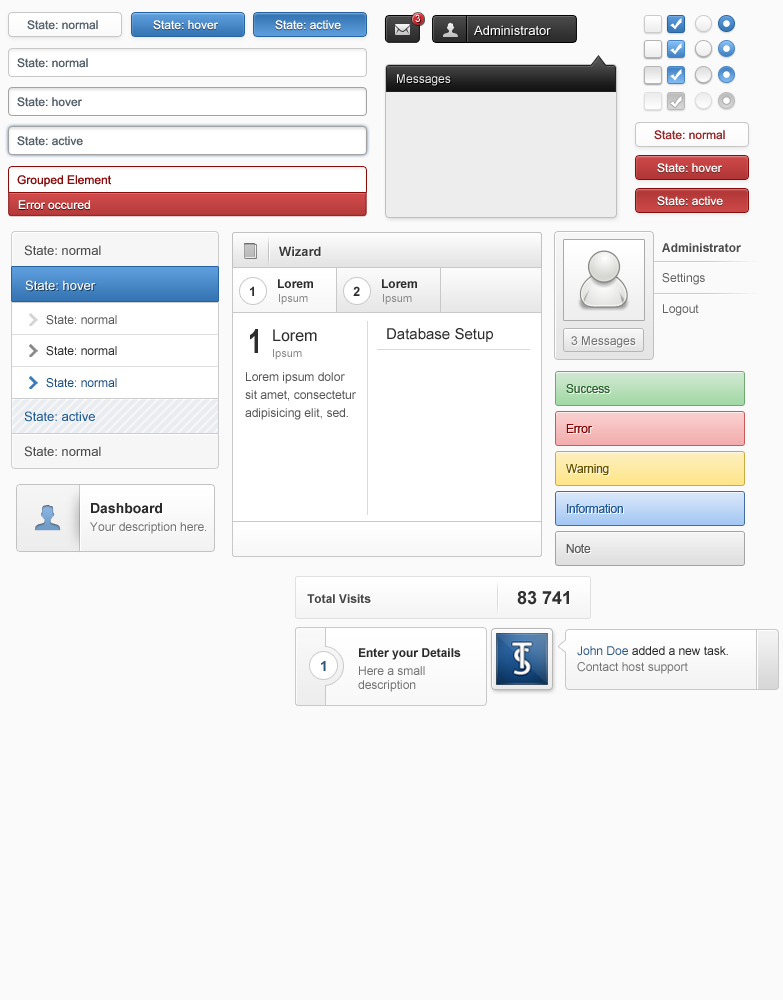
<style>
.page{position:relative;width:783px;height:1000px;background:#fafafa}
.page>*{position:absolute;margin:0}
.t1{font:10px "ArialMT";color:#ffffff}
.t2{font:12px "ArialMT";color:#58646d}
.t3{font:12px "ArialMT";color:#fafafa}
.t4{font:13px "ArialMT";color:#ffffff}
.t5{font:12px "ArialMT";color:#54616a}
.t6{font:12px "ArialMT";color:#efefef}
.t7{font:12px "ArialMT";color:#952a2a}
.t8{font:12px "ArialMT";color:#870d0d}
.t9{font:12px "ArialMT";color:#ffffff}
.t10{font:13px "ArialMT";color:#4b4b4b}
.t11{font:13px "Arial-BoldMT";color:#383838}
.t12{font:12px "Arial-BoldMT";color:#4d4d4d}
.t13{font:12px "Arial-BoldMT";color:#2d2d2d}
.t14{font:12px "ArialMT";color:#626262}
.t15{font:13px "Arial-BoldMT";color:#2d2d2d}
.t16{font:11px "ArialMT";color:#8b8b8b}
.t17{font:12px "ArialMT";color:#575757}
.t18{font:33px "Arial-BoldMT";color:#2d2d2d;scale:0.76 1}
.t19{font:16px "ArialMT";color:#2d2d2d}
.t20{font:15px "ArialMT";color:#2d2d2d}
.t21{font:12px "ArialMT";color:#6f6f6f}
.t22{font:12px "ArialMT";color:#292929}
.t23{font:12px/18px "ArialMT";color:#545454}
.t24{font:12px "ArialMT";color:#164a7e}
.t25{font:12px "ArialMT";letter-spacing:-0.02em;color:#2a632e}
.t26{font:13px "ArialMT";color:#205a94}
.t27{font:12px "ArialMT";letter-spacing:-0.02em;color:#820101}
.t28{font:12px "ArialMT";letter-spacing:-0.02em;color:#675100}
.t29{font:14px "Arial-BoldMT";color:#2a2a2a}
.t30{font:12px "ArialMT";letter-spacing:-0.02em;color:#205a94}
.t31{font:12px "ArialMT";color:#717171}
.t32{font:12px "ArialMT";letter-spacing:-0.02em;color:#5b5b5b}
.t33{font:18px "Arial-BoldMT";color:#313131}
.t34{font:12px "Arial-BoldMT";color:#464646}
.t35{font:12px "Arial-BoldMT";color:#2a2a2a}
.t36{font:12px "ArialMT";color:#262626}
.t37{font:12px "ArialMT";color:#305883}
.t38{font:14px "Arial-BoldMT";color:#2e5681}
.t39{font:12px "ArialMT";color:#747474}
</style>
<div class="page">
<p class="t1" style="left:415px;top:14px;width:5px;height:8px">3</p>
<p class="t2" style="left:27px;top:20px;width:71px;height:10px">State: normal</p>
<p class="t3" style="left:153px;top:20px;width:65px;height:10px">State: hover</p>
<p class="t3" style="left:275px;top:20px;width:66px;height:10px">State: active</p>
<p class="t4" style="left:474px;top:25px;width:77px;height:10px">Administrator</p>
<p class="t5" style="left:17px;top:58px;width:71px;height:10px">State: normal</p>
<p class="t6" style="left:397px;top:74px;width:54px;height:12px">Messages</p>
<p class="t5" style="left:17px;top:97px;width:65px;height:10px">State: hover</p>
<p class="t5" style="left:17px;top:136px;width:66px;height:10px">State: active</p>
<p class="t7" style="left:654px;top:130px;width:71px;height:10px">State: normal</p>
<p class="t3" style="left:657px;top:163px;width:65px;height:10px">State: hover</p>
<p class="t8" style="left:17px;top:175px;width:94px;height:12px">Grouped Element</p>
<p class="t3" style="left:657px;top:196px;width:66px;height:10px">State: active</p>
<p class="t9" style="left:18px;top:200px;width:72px;height:10px">Error occured</p>
<p class="t10" style="left:24px;top:245px;width:77px;height:11px">State: normal</p>
<p class="t11" style="left:279px;top:246px;width:42px;height:10px">Wizard</p>
<p class="t12" style="left:662px;top:243px;width:79px;height:9px">Administrator</p>
<p class="t4" style="left:25px;top:280px;width:71px;height:11px">State: hover</p>
<p class="t13" style="left:278px;top:279px;width:35px;height:9px">Lorem</p>
<p class="t13" style="left:382px;top:279px;width:35px;height:9px">Lorem</p>
<p class="t14" style="left:662px;top:273px;width:43px;height:12px">Settings</p>
<p class="t15" style="left:250px;top:286px;width:4px;height:10px">1</p>
<p class="t16" style="left:279px;top:294px;width:29px;height:11px">Ipsum</p>
<p class="t15" style="left:353px;top:286px;width:7px;height:10px">2</p>
<p class="t16" style="left:383px;top:294px;width:29px;height:11px">Ipsum</p>
<p class="t14" style="left:663px;top:304px;width:36px;height:12px">Logout</p>
<p class="t17" style="left:46px;top:315px;width:71px;height:10px">State: normal</p>
<p class="t18" style="left:250px;top:329px;width:8px;height:24px">1</p>
<p class="t19" style="left:273px;top:329px;width:44px;height:13px">Lorem</p>
<p class="t20" style="left:387px;top:328px;width:106px;height:14px">Database Setup</p>
<p class="t21" style="left:571px;top:336px;width:65px;height:12px">3 Messages</p>
<p class="t22" style="left:46px;top:346px;width:71px;height:10px">State: normal</p>
<p class="t16" style="left:273px;top:349px;width:29px;height:11px">Ipsum</p>
<p class="t23" style="left:245px;top:372px;width:111px;height:48px">Lorem ipsum dolor<br>sit amet, consectetur<br>adipisicing elit, sed.</p>
<p class="t24" style="left:46px;top:378px;width:71px;height:10px">State: normal</p>
<p class="t25" style="left:566px;top:384px;width:44px;height:9px">Success</p>
<p class="t26" style="left:24px;top:411px;width:71px;height:11px">State: active</p>
<p class="t27" style="left:566px;top:424px;width:26px;height:9px">Error</p>
<p class="t10" style="left:24px;top:446px;width:77px;height:11px">State: normal</p>
<p class="t28" style="left:566px;top:464px;width:43px;height:11px">Warning</p>
<p class="t29" style="left:91px;top:503px;width:71px;height:11px">Dashboard</p>
<p class="t30" style="left:567px;top:504px;width:56px;height:9px">Information</p>
<p class="t31" style="left:90px;top:522px;width:116px;height:12px">Your description here.</p>
<p class="t32" style="left:566px;top:544px;width:25px;height:9px">Note</p>
<p class="t33" style="left:517px;top:591px;width:52px;height:14px">83 741</p>
<p class="t34" style="left:307px;top:594px;width:64px;height:9px">Total Visits</p>
<p class="t35" style="left:359px;top:648px;width:102px;height:12px">Enter your Details</p>
<p class="t36" style="left:577px;top:646px;width:151px;height:10px"><span class="t37">John Doe</span> added a new task.</p>
<p class="t38" style="left:321px;top:661px;width:5px;height:10px">1</p>
<p class="t39" style="left:577px;top:662px;width:111px;height:12px">Contact host support</p>
<p class="t31" style="left:358px;top:666px;width:67px;height:26px">Here a small<br>description</p>
</div>
